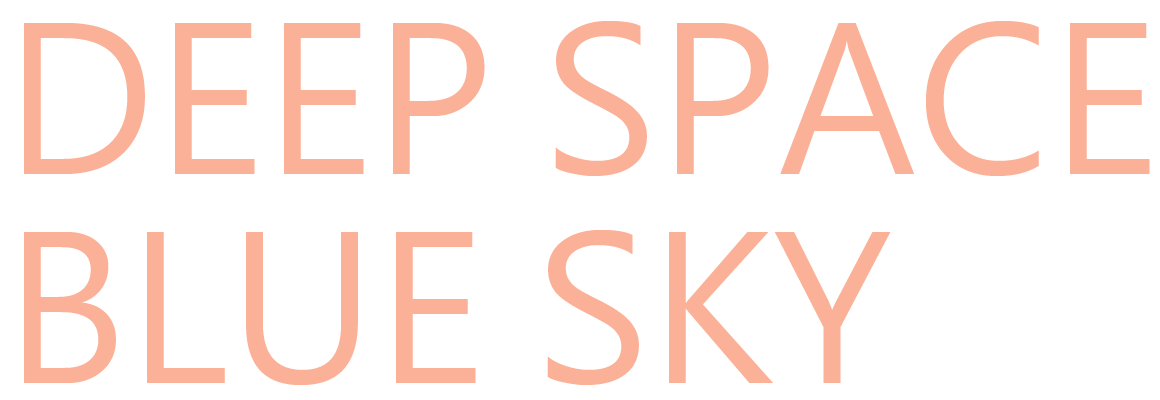
<style>
.page{position:relative;width:1160px;height:400px;background:#ffffff}
.page>*{position:absolute;margin:0}
.t1{font:200px "MicrosoftJhengHeiRegular";color:#fbb197}
</style>
<div class="page">
<p class="t1" style="left:24px;top:21px;width:1126px;height:155px">DEEP SPACE</p>
<p class="t1" style="left:24px;top:230px;width:867px;height:155px">BLUE SKY</p>
</div>
